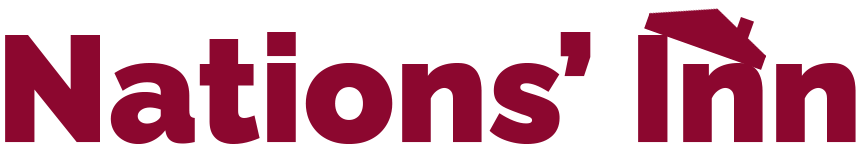
<style>
.page{position:relative;width:856px;height:152px;background:#ffffff}
.page>*{position:absolute;margin:0}
.t1{font:150px "RalewayRoman-Black";color:#8c072f}
</style>
<div class="page">
<p class="t1" style="left:5px;top:32px;width:851px;height:112px">Nations’ Inn</p>
</div>
